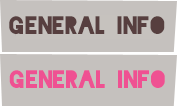
<style>
.page{position:relative;width:177px;height:108px;background:#c5c1be}
.page>*{position:absolute;margin:0}
.t1{font:24px "Blackout-Midnight";color:#573f3f}
.t2{font:24px "Blackout-Midnight";color:#ef5192}
</style>
<div class="page">
<p class="t1" style="left:9px;top:16px;width:156px;height:18px">General Info</p>
<p class="t2" style="left:9px;top:70px;width:156px;height:18px">General Info</p>
</div>
